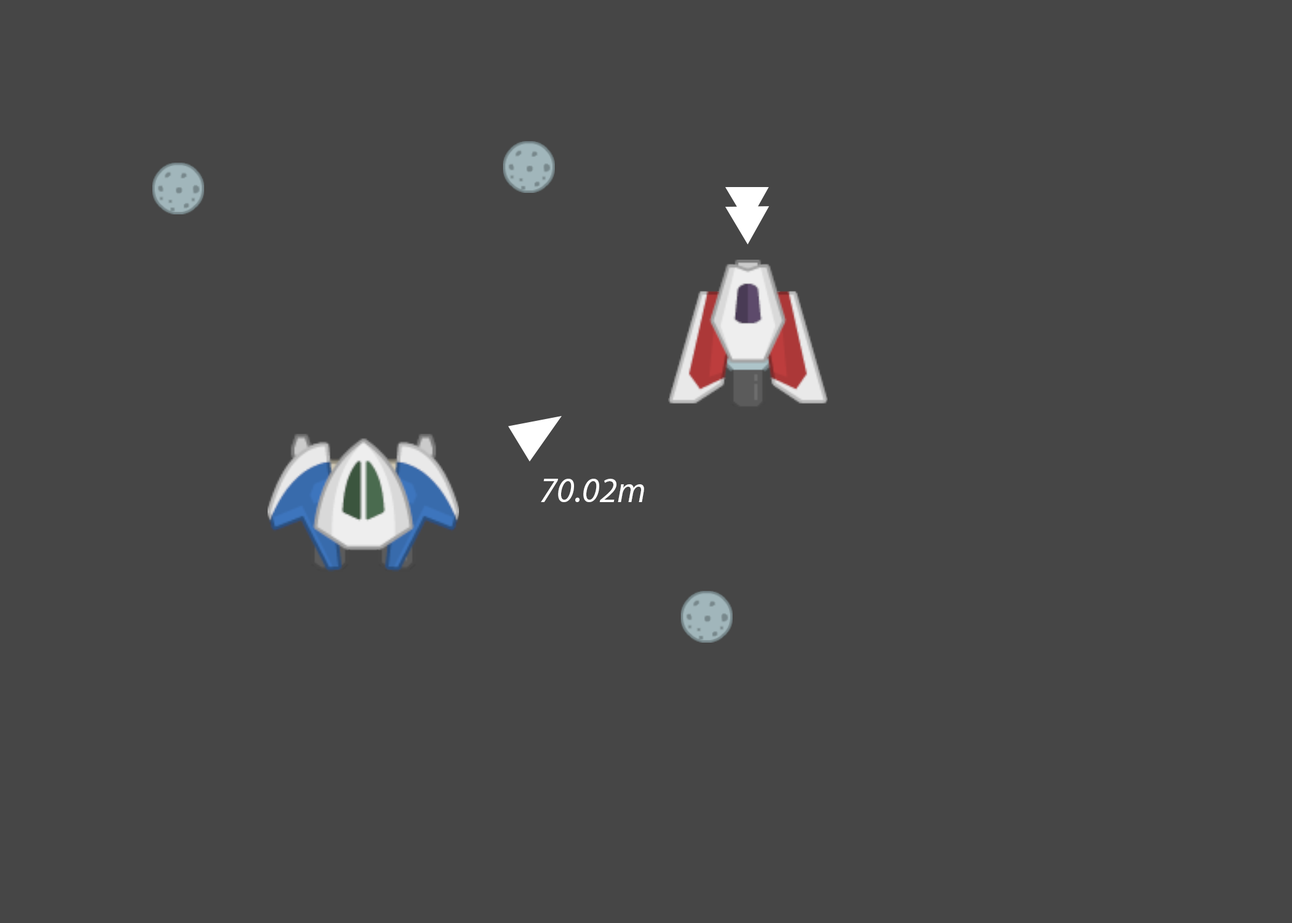
<style>
.page{position:relative;width:1292px;height:923px;background:#464646}
.page>*{position:absolute;margin:0}
.t1{font:35.7px "MyriadPro-It";color:#ffffff}
</style>
<div class="page">
<p class="t1" style="left:541px;top:479px;width:103px;height:23px">70.02m</p>
</div>
